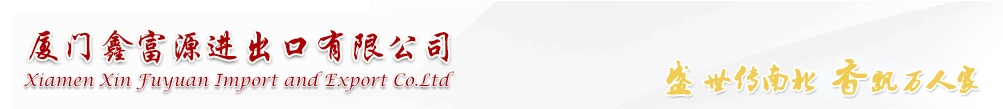
<style>
.page{position:relative;width:1003px;height:109px}
.page>*{position:absolute;margin:0}
.t1{font:36px "STXingkai";color:#aa0305}
.t2{font:17px "LucidaCalligraphy-Italic";color:#aa0305}
</style>
<div class="page">
<p class="t1" style="left:29px;top:29px;width:420px;height:35px">厦门鑫富源进出口有限公司</p>
<p class="t2" style="left:24px;top:71px;width:431px;height:21px">Xiamen Xin Fuyuan Import and Export Co.Ltd</p>
</div>
